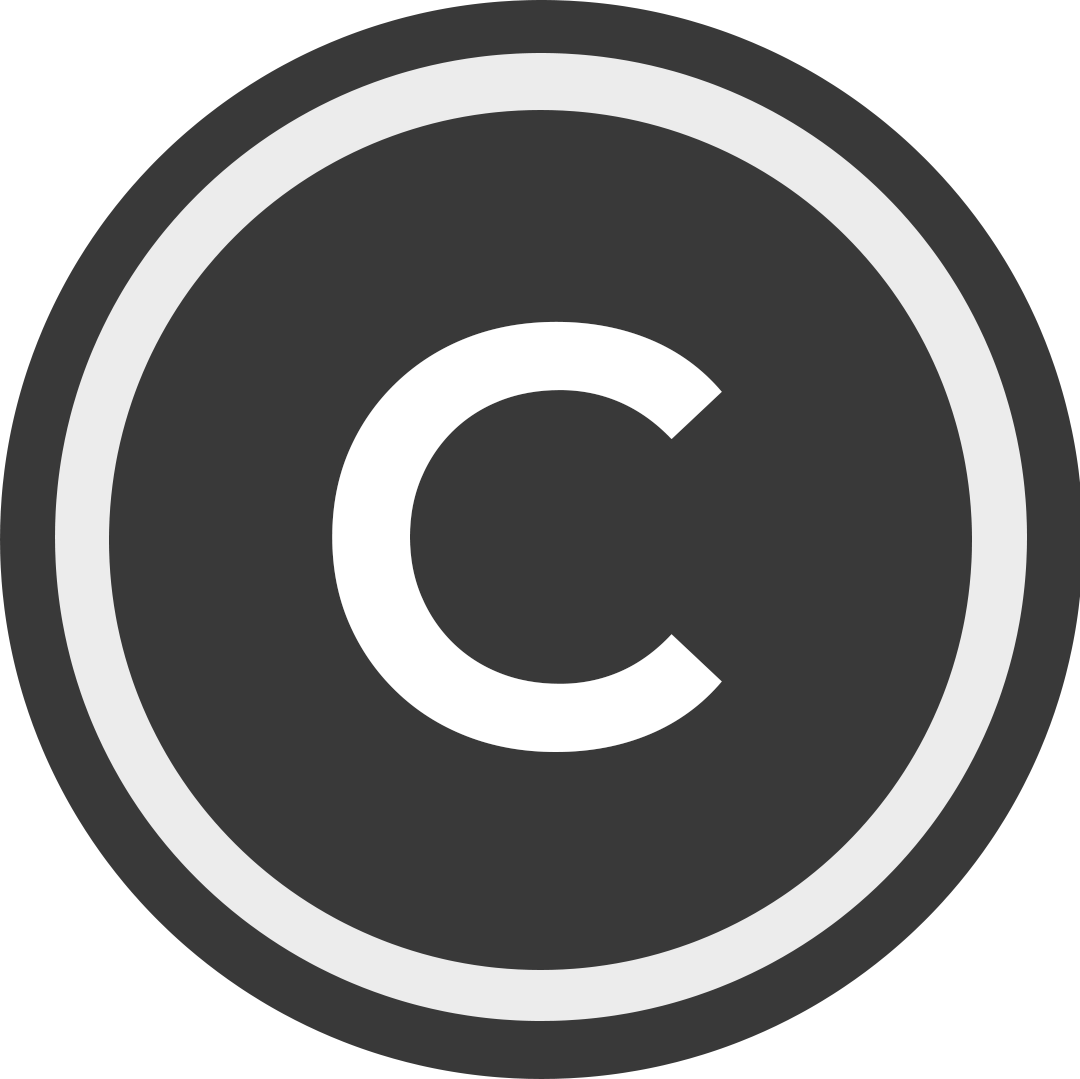
<style>
.page{position:relative;width:1080px;height:1079px;background:#393939}
.page>*{position:absolute;margin:0}
.t1{font:597.3px "MontserratRoman-SemiBold";color:#ffffff}
</style>
<div class="page">
<p class="t1" style="left:332px;top:321px;width:390px;height:431px">C</p>
</div>
